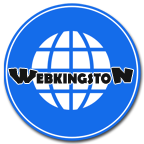
<style>
.page{position:relative;width:144px;height:144px;background:#ffffff}
.page>*{position:absolute;margin:0}
.t1{font:21.4px "BerlinSansFB-Bold";color:#151515;text-transform:uppercase;scale:0.91 1}
.t2{font:14.4px "BerlinSansFB-Bold";color:#151515;text-transform:uppercase;scale:0.91 1}
</style>
<div class="page">
<p class="t1" style="left:8px;top:68px;width:30px;height:16px">w</p>
<p class="t2" style="left:36px;top:73px;width:75px;height:12px">ebkingsto</p>
<p class="t1" style="left:111px;top:67px;width:22px;height:17px">n</p>
</div>
